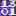
<style>
.page{position:relative;width:16px;height:16px}
.page>*{position:absolute;margin:0}
.t1{font:9.8px "PixelEmulator";color:#f0f0ff;scale:1.5 1}
.t2{font:9.8px "PixelEmulator";color:#f0f0ff;scale:1.06 1}
.t3{font:10px "PixelEmulator";color:#f0f0ff;scale:1.06 1}
.t4{font:9.8px "PixelEmulator";color:#f0f0ff;scale:1.48 1}
</style>
<div class="page">
<p class="t1" style="left:0px;top:0px;width:10px;height:7px">1</p>
<p class="t2" style="left:8px;top:0px;width:8px;height:8px">3</p>
<p class="t3" style="left:1px;top:8px;width:8px;height:8px">0</p>
<p class="t4" style="left:8px;top:8px;width:9px;height:7px">1</p>
</div>
